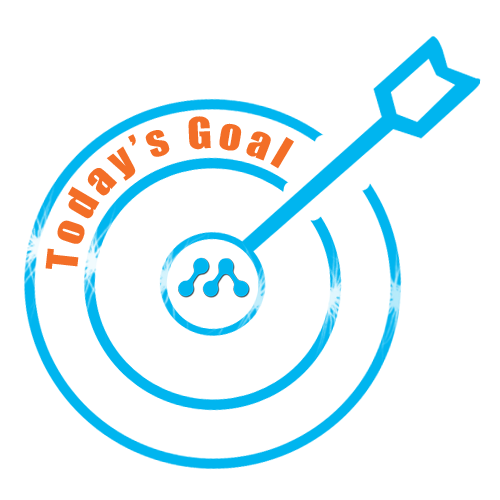
<style>
.page{position:relative;width:500px;height:500px;background:#ffffff}
.page>*{position:absolute;margin:0}
.t1{font:39.7px "Impact";letter-spacing:0.1em;color:#f36e27;scale:1.12 1}
</style>
<div class="page">
<p class="t1" style="left:45px;top:116px;width:249px;height:153px">Today’s Goal</p>
</div>
